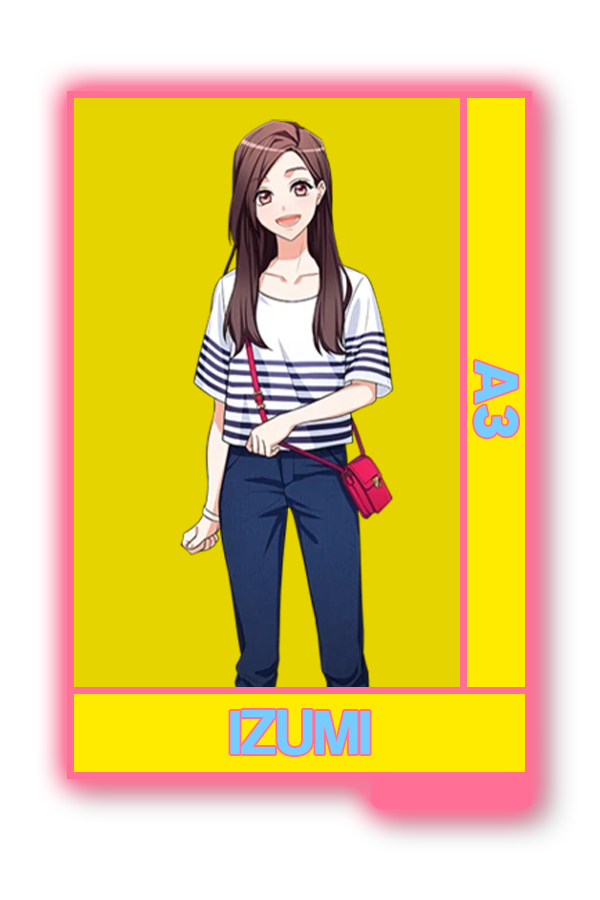
<style>
.page{position:relative;width:600px;height:900px;background:#e6d400}
.page>*{position:absolute;margin:0}
.t1{font:60.5px "MADETOMMY-Bold";color:#74ccff}
.t2{font:65.1px "CoolveticaRg-Regular";color:#74ccff}
</style>
<div class="page">
<p class="t1" style="left:474px;top:360px;width:44px;height:78px;rotate:90deg">A3</p>
<p class="t2" style="left:230px;top:710px;width:140px;height:45px">IZUMI</p>
</div>
